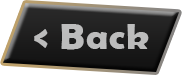
<style>
.page{position:relative;width:182px;height:75px;background:#ffffff}
.page>*{position:absolute;margin:0}
.t1{font:36.1px "BerlinSansFBDemi-Bold";letter-spacing:0.04em;color:#bcbcbc;scale:1.04 1}
</style>
<div class="page">
<p class="t1" style="left:34px;top:24px;width:115px;height:26px">&lt; Back</p>
</div>
